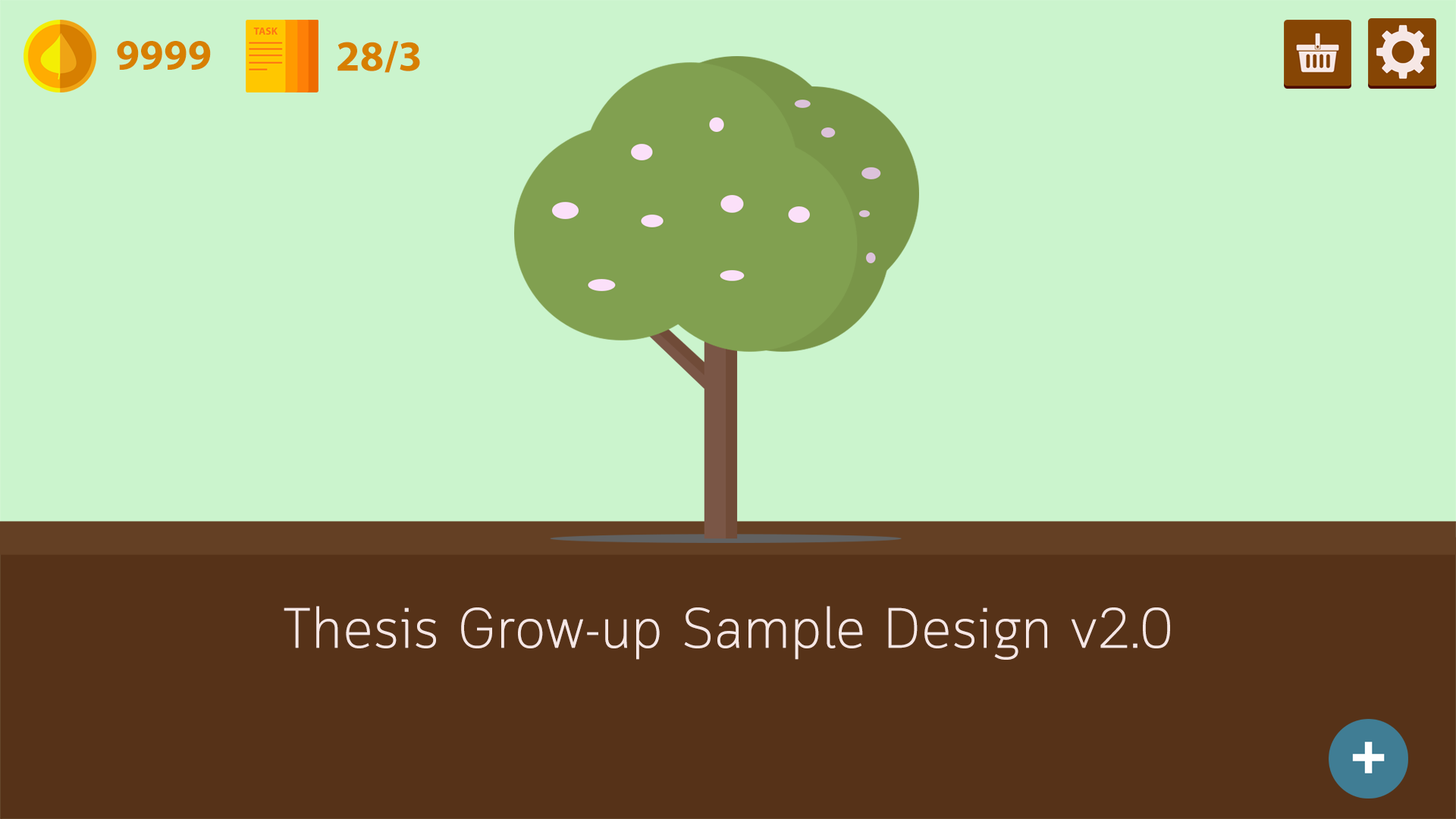
<style>
.page{position:relative;width:1456px;height:819px;background:#cbf4cd}
.page>*{position:absolute;margin:0}
.t1{font:56.9px "TFPhethai";color:#d77f01}
.t2{font:56.9px "Cloud-Light";color:#f6e7e5}
</style>
<div class="page">
<p class="t1" style="left:117px;top:41px;width:94px;height:29px">9999</p>
<p class="t1" style="left:337px;top:41px;width:83px;height:32px">28/3</p>
<p class="t2" style="left:284px;top:606px;width:886px;height:54px">Thesis Grow-up Sample Design v2.0</p>
</div>
